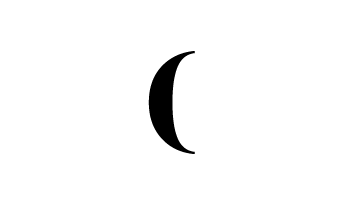
<style>
.page{position:relative;width:360px;height:200px;background:#ffffff}
.page>*{position:absolute;margin:0}
.t1{font:111.2px "Elephant-Regular";letter-spacing:-0.02em;color:#000000;scale:1.09 1}
</style>
<div class="page">
<p class="t1" style="left:148px;top:51px;width:47px;height:103px">(</p>
</div>
